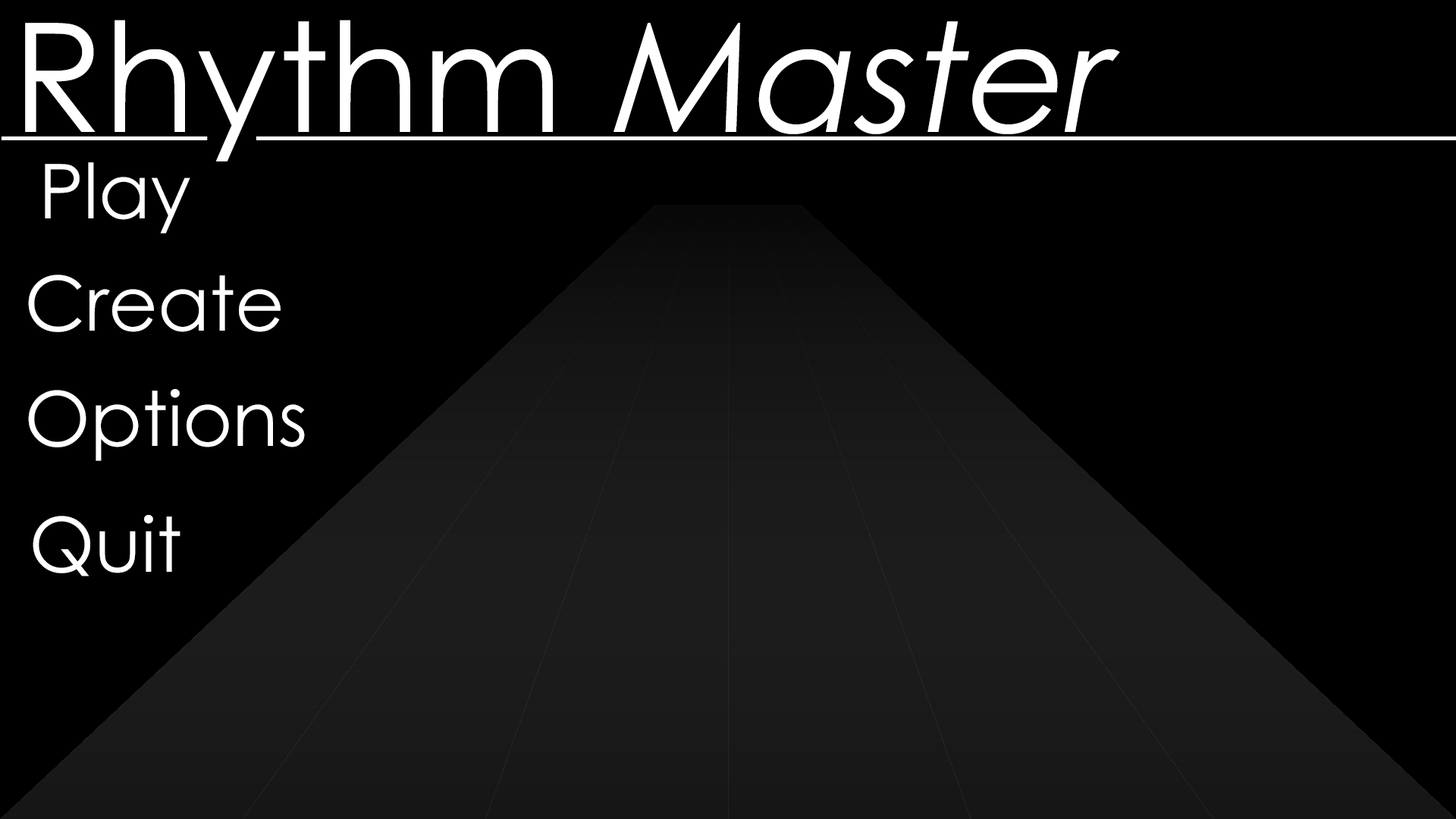
<style>
.page{position:relative;width:1456px;height:819px;background:#000000}
.page>*{position:absolute;margin:0}
.t1{font:151.7px "CenturyGothic";color:#ffffff}
.t2{font:151.7px "CenturyGothic";color:#ffffff;font-style:italic}
.t3{font:75.8px "CenturyGothic";color:#ffffff}
</style>
<div class="page">
<p class="t1" style="left:25px;top:20px;width:1095px;height:142px">Rhythm <span class="t2">Master</span></p>
<p class="t3" style="left:45px;top:162px;width:145px;height:72px">Play</p>
<p class="t3" style="left:28px;top:275px;width:253px;height:57px">Create</p>
<p class="t3" style="left:28px;top:389px;width:277px;height:72px">Options</p>
<p class="t3" style="left:33px;top:515px;width:147px;height:61px">Quit</p>
</div>
